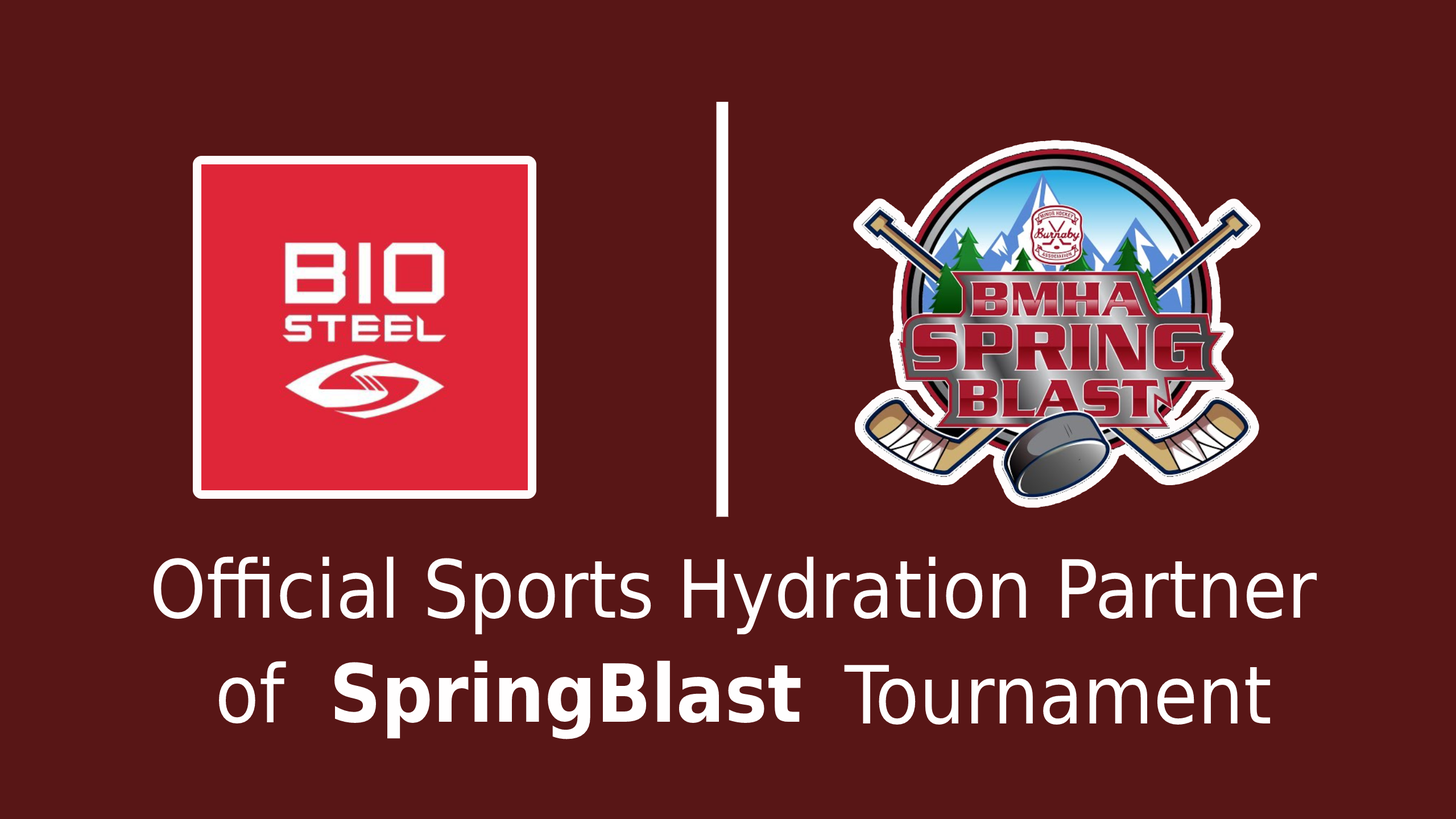
<style>
.page{position:relative;width:1456px;height:819px;background:#581616}
.page>*{position:absolute;margin:0}
.t1{font:80.2px "DejaVuSansCondensed";color:#fefdfd}
.t2{font:80.2px "DejaVuSansCondensed";color:#fffefe}
.t3{font:80.2px "DejaVuSansCondensed-Bold";color:#fffefe}
</style>
<div class="page">
<p class="t1" style="left:154px;top:556px;width:1163px;height:79px">Official Sports Hydration Partner</p>
<p class="t2" style="left:219px;top:661px;width:67px;height:62px">of</p>
<p class="t3" style="left:334px;top:660px;width:467px;height:79px">SpringBlast</p>
<p class="t2" style="left:844px;top:665px;width:427px;height:60px">Tournament</p>
</div>
